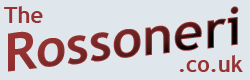
<style>
.page{position:relative;width:250px;height:80px;background:#dfe6ec}
.page>*{position:absolute;margin:0}
.t1{font:22px "TrebuchetMS-Bold";color:#993333}
.t2{font:53px "TrebuchetMS-Bold"}
</style>
<div class="page">
<p class="t1" style="left:4px;top:6px;width:39px;height:17px">The</p>
<p class="t2" style="left:8px;top:6px;width:231px;height:66px;rotate:-7deg">Rossoneri</p>
<p class="t1" style="left:179px;top:55px;width:64px;height:17px">.co.uk</p>
</div>
